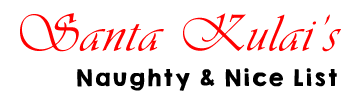
<style>
.page{position:relative;width:350px;height:100px;background:#ffffff}
.page>*{position:absolute;margin:0}
.t1{font:54.2px "Vivaldii";letter-spacing:0.04em;color:#ff0000}
.t2{font:20.9px "KGHAPPYSolid";letter-spacing:0.04em;color:#000000}
</style>
<div class="page">
<p class="t1" style="left:20px;top:13px;width:321px;height:39px">Santa Kulai’s</p>
<p class="t2" style="left:77px;top:68px;width:260px;height:23px">Naughty &amp; Nice List</p>
</div>
